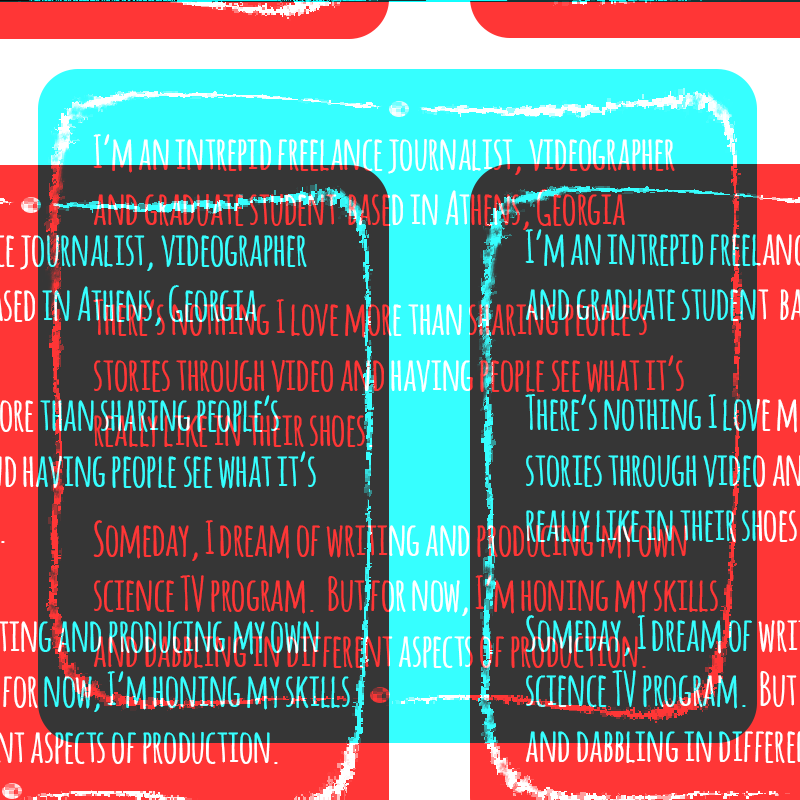
<style>
.page{position:relative;width:800px;height:800px;background:#363636}
.page>*{position:absolute;margin:0}
.t1{font:46px "Amatic-Bold"}
.t2{font:35px "Amatic-Bold"}
</style>
<div class="page">
<p class="t1" style="left:93px;top:132px;width:625px;height:534px;text-align:right"><span class="t2"><br></span>I’m an intrepid freelance journalist, videographer and graduate student  based in Athens, Georgia<br><br>There’s nothing I love more than sharing people’s <br>stories through video and having people see what it’s really like in their shoes. <br><br>Someday, I dream of writing and producing my own science TV program.  But for now, I’m honing my skills and dabbling in different aspects of production.</p>
</div>
